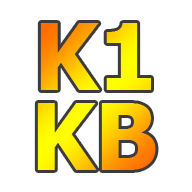
<style>
.page{position:relative;width:192px;height:192px;background:#ffffff}
.page>*{position:absolute;margin:0}
.t1{font:92px/80px "Tahoma-Bold"}
</style>
<div class="page">
<p class="t1" style="left:37px;top:23px;width:119px;height:147px;text-align:center">K1<br>KB</p>
</div>
